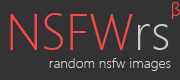
<style>
.page{position:relative;width:180px;height:80px;background:#333333}
.page>*{position:absolute;margin:0}
.t1{font:18px "SegoeUI-Light";color:#f7484e}
.t2{font:50px "SegoeUI-Light";color:#f7484e}
.t3{font:50px "SegoeUI-Light";color:#cacaca}
.t4{font:14px "SegoeUI-Light";color:#cacaca}
</style>
<div class="page">
<p class="t1" style="left:172px;top:2px;width:8px;height:17px">β</p>
<p class="t2" style="left:10px;top:13px;width:159px;height:37px">NSFW<span class="t3">rs</span></p>
<p class="t4" style="left:49px;top:58px;width:122px;height:13px">random nsfw images</p>
</div>
